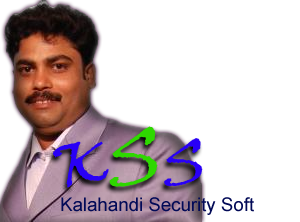
<style>
.page{position:relative;width:300px;height:222px;background:#ffffff}
.page>*{position:absolute;margin:0}
.t1{font:64px "VinerHandITC";color:#2900f6}
.t2{font:80px "VinerHandITC";color:#2ed800}
.t3{font:18.7px "ArialMT";color:#020a57}
</style>
<div class="page">
<p class="t1" style="left:53px;top:126px;width:150px;height:62px">K<span class="t2">S</span>S</p>
<p class="t3" style="left:61px;top:197px;width:193px;height:18px">Kalahandi Security Soft</p>
</div>
